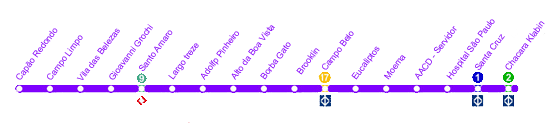
<style>
.page{position:relative;width:560px;height:138px;background:#ffffff}
.page>*{position:absolute;margin:0}
.t1{font:8.7px "ArialMT"}
.t2{font:8.7px "ArialMT";color:#8501fa}
.t3{font:8.6px "ArialMT"}
</style>
<div class="page">
<p class="t1" style="left:16px;top:28px;width:42px;height:52px;rotate:-53deg">Capão Redondo</p>
<p class="t1" style="left:76px;top:28px;width:44px;height:52px;rotate:-53deg">Vila das Belezas</p>
<p class="t1" style="left:109px;top:24px;width:44px;height:56px;rotate:-53deg">Gioavanni Grochi</p>
<p class="t2" style="left:139px;top:30px;width:34px;height:41px;rotate:-53deg">Santo Amaro</p>
<p class="t1" style="left:231px;top:25px;width:44px;height:55px;rotate:-53deg">Alto da Boa Vista</p>
<p class="t1" style="left:415px;top:26px;width:42px;height:54px;rotate:-53deg">AACD - Servidor</p>
<p class="t2" style="left:446px;top:19px;width:49px;height:61px;rotate:-53deg">Hospital São Paulo</p>
<p class="t1" style="left:505px;top:21px;width:40px;height:49px;rotate:-53deg">Chacara Klabin</p>
<p class="t1" style="left:47px;top:35px;width:36px;height:45px;rotate:-53deg">Campo Limpo</p>
<p class="t1" style="left:201px;top:31px;width:38px;height:49px;rotate:-53deg">Adolfp Pinheiro</p>
<p class="t1" style="left:322px;top:31px;width:32px;height:39px;rotate:-53deg">Campo Belo</p>
<p class="t3" style="left:475px;top:34px;width:30px;height:36px;rotate:-53deg">Santa Cruz</p>
<p class="t1" style="left:168px;top:43px;width:31px;height:37px;rotate:-53deg">Largo treze</p>
<p class="t2" style="left:260px;top:42px;width:31px;height:38px;rotate:-53deg">Borba Gato</p>
<p class="t1" style="left:296px;top:48px;width:24px;height:27px;rotate:-53deg">Brooklin</p>
<p class="t2" style="left:351px;top:46px;width:29px;height:34px;rotate:-53deg">Eucaliptos</p>
<p class="t1" style="left:384px;top:55px;width:22px;height:25px;rotate:-53deg">Moema</p>
</div>
